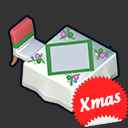
<style>
.page{position:relative;width:128px;height:128px;background:#333333}
.page>*{position:absolute;margin:0}
.t1{font:16.2px "UTM-Androgyne";color:#ffffff;font-weight:bold}
</style>
<div class="page">
<p class="t1" style="left:80px;top:92px;width:41px;height:20px;rotate:-14deg">Xmas</p>
</div>
